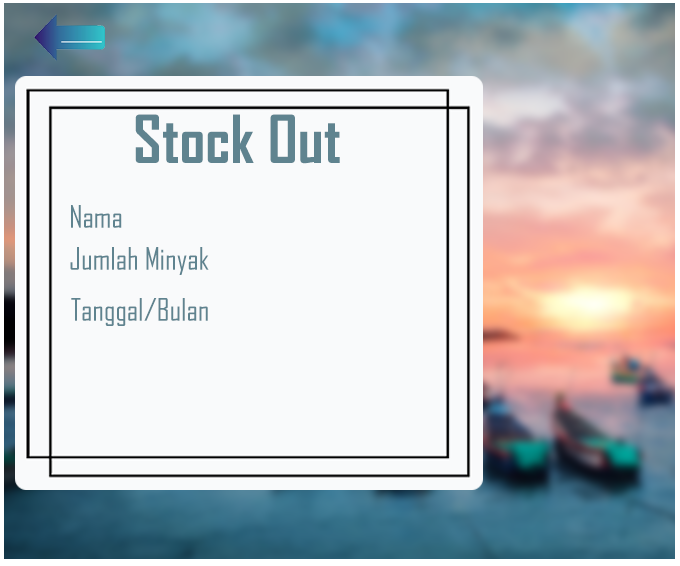
<style>
.page{position:relative;width:680px;height:566px;background:#f9fafb}
.page>*{position:absolute;margin:0}
.t1{font:63.5px "AgencyFB-Bold";color:#5f838f}
.t2{font:29.8px "AgencyFB-Reg";color:#5f838f}
</style>
<div class="page">
<p class="t1" style="left:135px;top:114px;width:205px;height:50px">Stock Out</p>
<p class="t2" style="left:71px;top:205px;width:51px;height:23px">Nama</p>
<p class="t2" style="left:70px;top:247px;width:139px;height:28px">Jumlah Minyak</p>
<p class="t2" style="left:71px;top:298px;width:137px;height:28px">Tanggal/Bulan</p>
</div>
